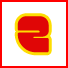
<style>
.page{position:relative;width:68px;height:68px;background:#ffffff}
.page>*{position:absolute;margin:0}
.t1{font:72px "Chick";color:#e00606}
</style>
<div class="page">
<p class="t1" style="left:17px;top:16px;width:32px;height:37px">2</p>
</div>
